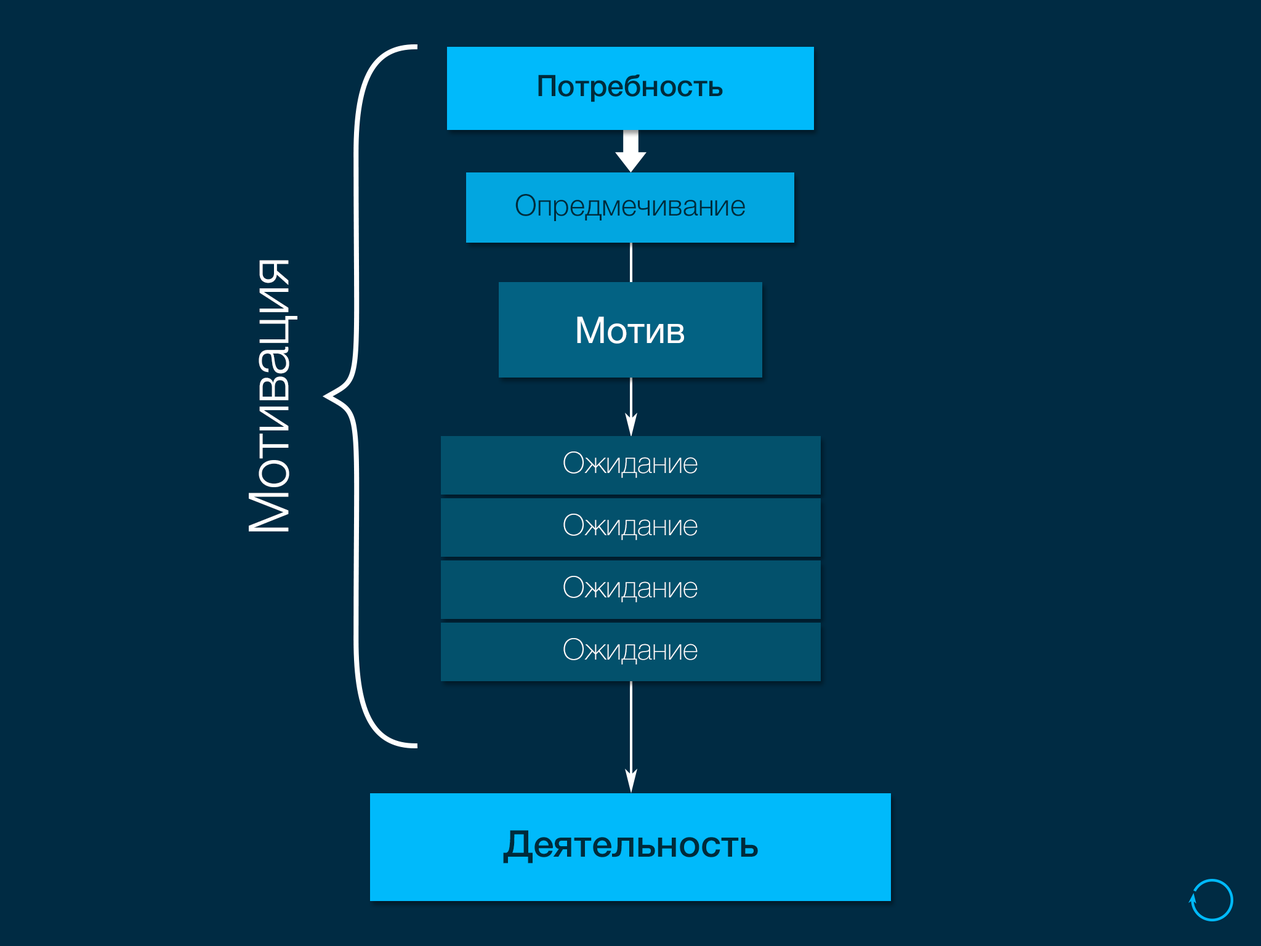
<style>
.page{position:relative;width:1261px;height:946px;background:#002b43}
.page>*{position:absolute;margin:0}
.t1{font:29.6px "HelveticaNeue-Medium";color:#002b3b}
.t2{font:29.6px "HelveticaNeue-Light";color:#002b3b}
.t3{font:55.4px "HelveticaNeue-Light";color:#ffffff}
.t4{font:36.9px "HelveticaNeue";color:#ffffff}
.t5{font:29.6px "HelveticaNeue-Thin";color:#ffffff}
.t6{font:36.9px "HelveticaNeue-Medium";color:#002b3b}
</style>
<div class="page">
<p class="t1" style="left:538px;top:74px;width:185px;height:28px">Потребность</p>
<p class="t2" style="left:515px;top:194px;width:230px;height:27px">Опредмечивание</p>
<p class="t3" style="left:249px;top:260px;width:48px;height:271px;rotate:-90deg">Мотивация</p>
<p class="t4" style="left:577px;top:316px;width:107px;height:28px">Мотив</p>
<p class="t5" style="left:563px;top:451px;width:135px;height:27px">Ожидание</p>
<p class="t5" style="left:563px;top:513px;width:135px;height:27px">Ожидание</p>
<p class="t5" style="left:563px;top:576px;width:135px;height:26px">Ожидание</p>
<p class="t5" style="left:563px;top:638px;width:135px;height:26px">Ожидание</p>
<p class="t6" style="left:503px;top:830px;width:255px;height:33px">Деятельность</p>
</div>
